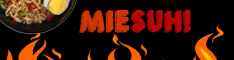
<style>
.page{position:relative;width:234px;height:60px;background:#000000}
.page>*{position:absolute;margin:0}
.t1{font:24px "KGHAPPY";color:#b80707}
.t2{font:24px "KGHAPPY";color:#d03600}
</style>
<div class="page">
<p class="t1" style="left:79px;top:9px;width:112px;height:24px"><span class="t2">MIE</span>SUH!</p>
</div>
